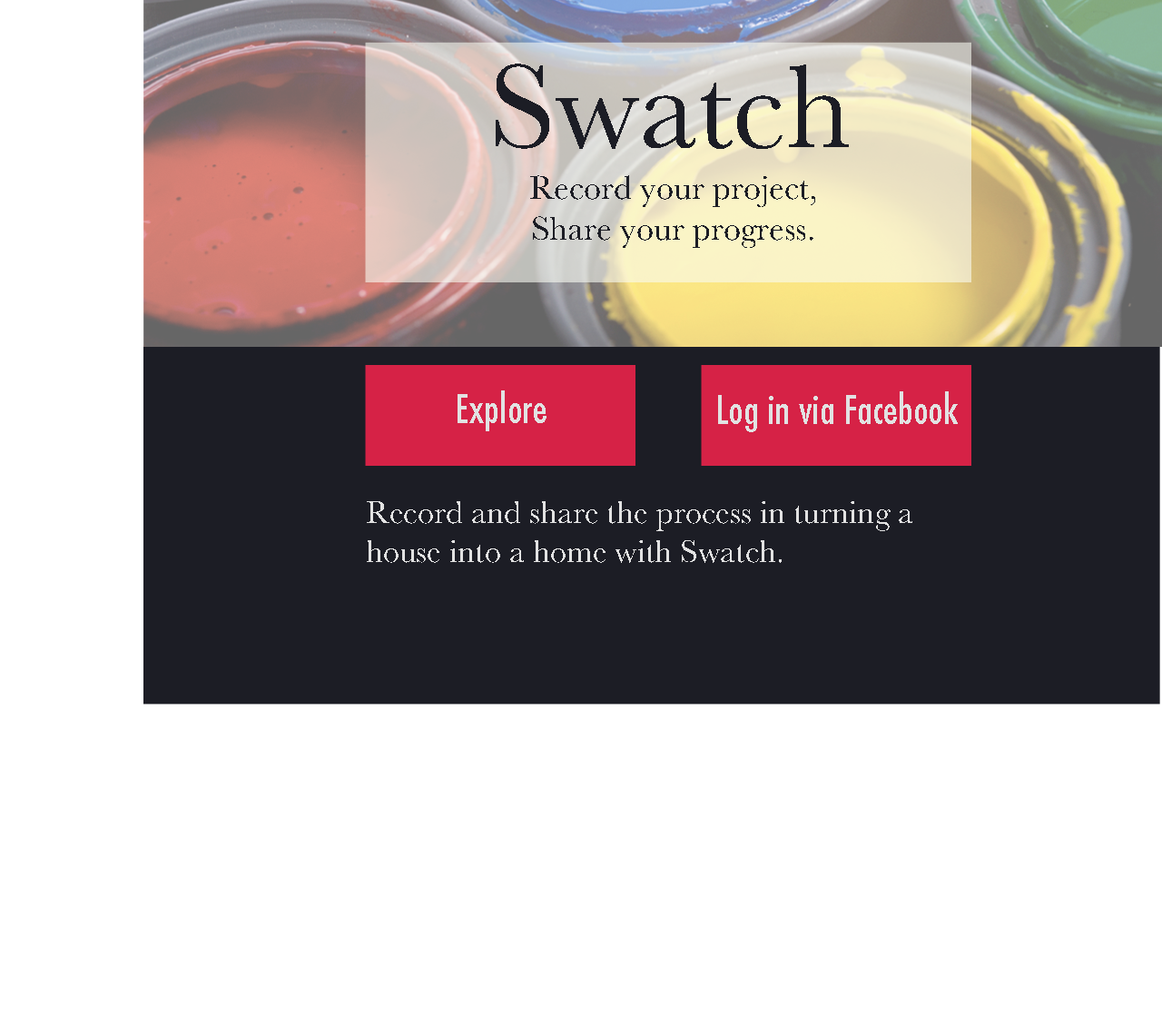
<style>
.page{position:relative;width:1162px;height:1026px;background:#ffffff}
.page>*{position:absolute;margin:0}
.t1{font:123.5px "Baskerville";color:#1c1d25}
.t2{font:34.5px "Baskerville";color:#1c1d25}
.t3{font:39px "Futura-CondensedMedium";color:#e2e2e2}
.t4{font:32.7px "Baskerville";color:#e2e2e2}
</style>
<div class="page">
<p class="t1" style="left:496px;top:64px;width:353px;height:85px">Swatch</p>
<p class="t2" style="left:530px;top:175px;width:285px;height:73px;text-align:center">Record your project,<br>Share your progress.</p>
<p class="t3" style="left:458px;top:390px;width:89px;height:41px">Explore</p>
<p class="t3" style="left:718px;top:391px;width:240px;height:41px">Log in via Facebook</p>
<p class="t4" style="left:367px;top:501px;width:546px;height:62px">Record and share the process in turning a house into a home with Swatch.</p>
</div>
